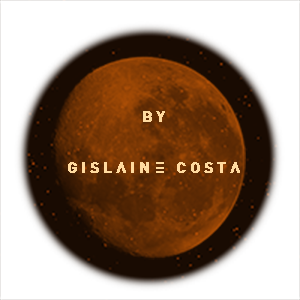
<style>
.page{position:relative;width:300px;height:300px;background:#ffffff}
.page>*{position:absolute;margin:0}
.t1{font:15.3px/51.1px "Protomolecule-Bold";letter-spacing:0.25em;color:#ffda9f;font-weight:bold}
</style>
<div class="page">
<p class="t1" style="left:68px;top:111px;width:172px;height:62px;text-align:center">By<br>Gislaine Costa</p>
</div>
